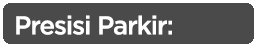
<style>
.page{position:relative;width:257px;height:47px;background:#4a4a4a}
.page>*{position:absolute;margin:0}
.t1{font:25.8px "iCielGotham-Medium";letter-spacing:-0.04em;color:#ffffff}
</style>
<div class="page">
<p class="t1" style="left:16px;top:15px;width:156px;height:20px">Presisi Parkir:</p>
</div>
